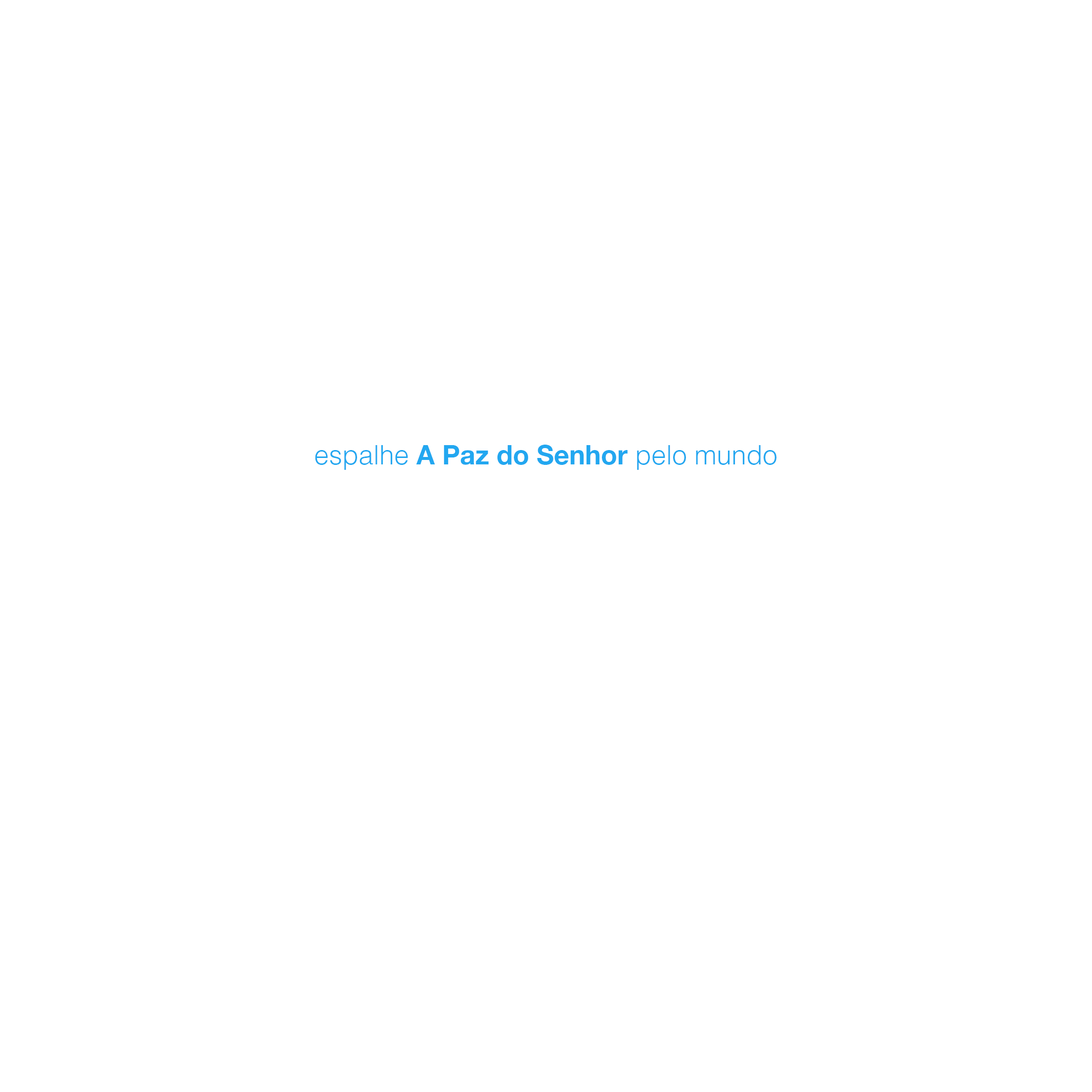
<style>
.page{position:relative;width:1092px;height:1092px;background:#ffffff}
.page>*{position:absolute;margin:0}
.t1{font:26.7px "HelveticaNeue-Bold";color:#22a7f0}
.t2{font:26.7px "Helvetica-Light";color:#22a7f0}
</style>
<div class="page">
<p class="t1" style="left:315px;top:445px;width:461px;height:25px"><span class="t2">espalhe </span>A Paz do Senhor<span class="t2"> pelo mundo</span></p>
</div>
